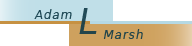
<style>
.page{position:relative;width:192px;height:46px;background:#ffffff}
.page>*{position:absolute;margin:0}
.t1{font:12px "DejaVuSans";letter-spacing:0.075em;color:#103b48;font-style:italic}
.t2{font:36px "DejaVuSans";letter-spacing:0.075em;color:#103b48;font-style:italic}
</style>
<div class="page">
<p class="t1" style="left:34px;top:9px;width:38px;height:10px;opacity:0.9">Adam</p>
<p class="t2" style="left:79px;top:8px;width:18px;height:26px;opacity:0.9">L</p>
<p class="t1" style="left:103px;top:29px;width:40px;height:10px;opacity:0.9">Marsh</p>
</div>
